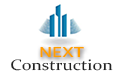
<style>
.page{position:relative;width:120px;height:80px;background:#ffffff}
.page>*{position:absolute;margin:0}
.t1{font:15.4px "Corbel-Bold";color:#ffa000;scale:1.17 1}
.t2{font:15.4px "Constantia";color:#222222;scale:1.17 1}
</style>
<div class="page">
<p class="t1" style="left:40px;top:46px;width:44px;height:12px">NEXT</p>
<p class="t2" style="left:11px;top:59px;width:102px;height:12px">Construction</p>
</div>
